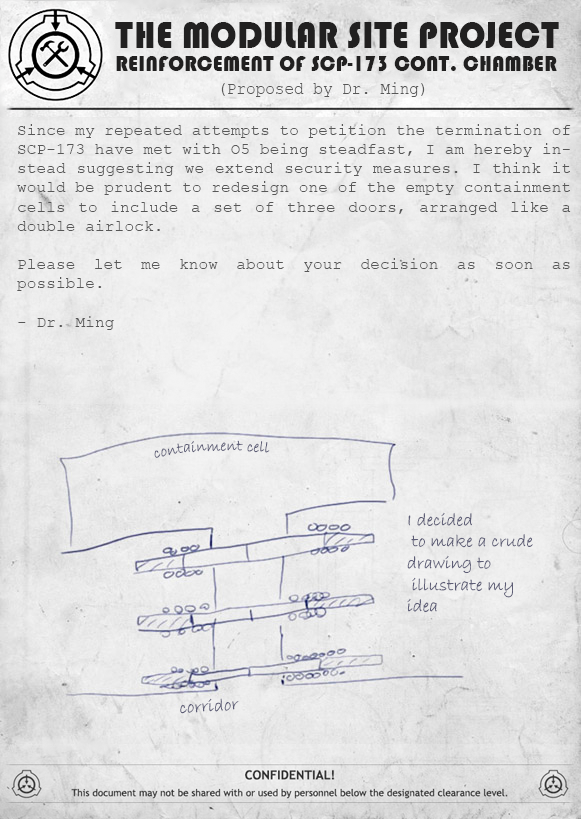
<style>
.page{position:relative;width:581px;height:819px}
.page>*{position:absolute;margin:0}
.t1{font:38.8px "Bauhaus93";letter-spacing:0.01em;color:#212020;scale:0.9 1}
.t2{font:23.2px "Bauhaus93";letter-spacing:0.01em;color:#212020;text-transform:uppercase;scale:0.9 1}
.t3{font:17.5px "CourierNewPSMT";letter-spacing:0.01em;color:#575757;scale:0.9 1}
.t4{font:16px "CourierNewPSMT";letter-spacing:0.01em;color:#575757}
.t5{font:16px "BradleyHandITC";letter-spacing:0.01em;color:#5d5d76}
.t6{font:18px "BradleyHandITC";letter-spacing:0.01em;color:#5d5d76}
</style>
<div class="page">
<p class="t1" style="left:115px;top:22px;width:444px;height:26px">THE MODULAR SITE PROJECT</p>
<p class="t2" style="left:116px;top:56px;width:441px;height:15px">Reinforcement of SCP-173 Cont. Chamber</p>
<p class="t3" style="left:221px;top:82px;width:204px;height:15px">(Proposed by Dr. Ming)</p>
<p class="t4" style="left:17px;top:124px;width:554px;height:206px;text-align:justify">Since my repeated attempts to petition the termination of SCP-173 have met with O5 being steadfast, I am hereby in- stead suggesting we extend security measures. I think it would be prudent to redesign one of the empty containment cells to include a set of three doors, arranged like a double airlock.<br><br>Please let me know about your decision as soon as possible.<br><br>- Dr. Ming</p>
<p class="t5" style="left:154px;top:440px;width:116px;height:18px">containment cell</p>
<p class="t6" style="left:407px;top:512px;width:126px;height:100px">I decided <br> to make a crude<br>drawing to<br> illustrate my <br>idea</p>
<p class="t6" style="left:180px;top:698px;width:59px;height:16px;rotate:-4deg">corridor</p>
</div>
